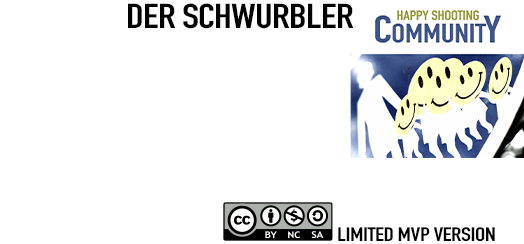
<style>
.page{position:relative;width:524px;height:244px;background:#ffffff}
.page>*{position:absolute;margin:0}
.t1{font:34px "DINCondensed-Bold";letter-spacing:-0.02em;color:#000000;text-transform:uppercase;scale:1.23 1}
.t2{font:19.1px "DINCondensed-Bold";letter-spacing:-0.02em;color:#000000;text-transform:uppercase;scale:1.27 1}
</style>
<div class="page">
<p class="t1" style="left:128px;top:3px;width:226px;height:26px">Der Schwurbler</p>
<p class="t2" style="left:338px;top:227px;width:157px;height:14px">Limited MVP VERSION</p>
</div>
